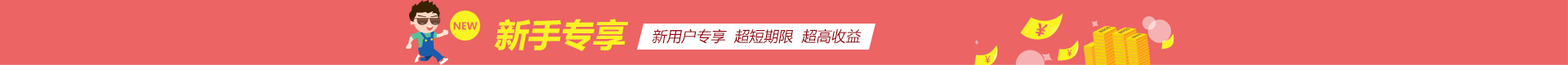
<style>
.page{position:relative;width:1568px;height:65px;background:#ec6464}
.page>*{position:absolute;margin:0}
.t1{font:9.8px "MicrosoftYaHei-Bold";color:#ec6464}
.t2{font:32.7px "MicrosoftYaHei-Bold";color:#f9f323;font-style:italic}
.t3{font:14.7px "MicrosoftYaHei";color:#970510;font-style:italic}
.t4{font:16.9px "MicrosoftYaHei-Bold";color:#ec6464;font-style:italic}
.t5{font:8.9px "MicrosoftYaHei";color:#ec6464}
.t6{font:9.9px "MicrosoftYaHei";color:#ec6464}
</style>
<div class="page">
<p class="t1" style="left:453px;top:22px;width:25px;height:8px">NEW</p>
<p class="t2" style="left:494px;top:19px;width:135px;height:32px">新手专享</p>
<p class="t3" style="left:652px;top:29px;width:210px;height:15px">新用户专享  超短期限  超高收益</p>
<p class="t4" style="left:1035px;top:23px;width:14px;height:14px;rotate:10deg">￥</p>
<p class="t5" style="left:1067px;top:50px;width:5px;height:7px">￥</p>
<p class="t6" style="left:985px;top:56px;width:6px;height:8px">￥</p>
</div>
